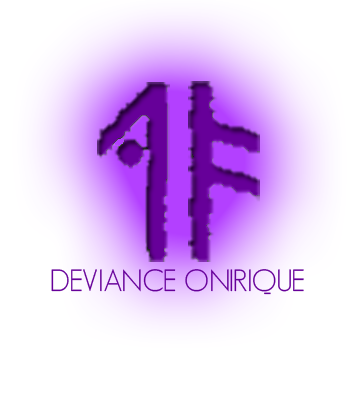
<style>
.page{position:relative;width:360px;height:400px;background:#ffffff}
.page>*{position:absolute;margin:0}
.t1{font:30px "GeosansLight";color:#660099}
</style>
<div class="page">
<p class="t1" style="left:51px;top:269px;width:253px;height:26px">DEVIANCE ONIRIQUE</p>
</div>
